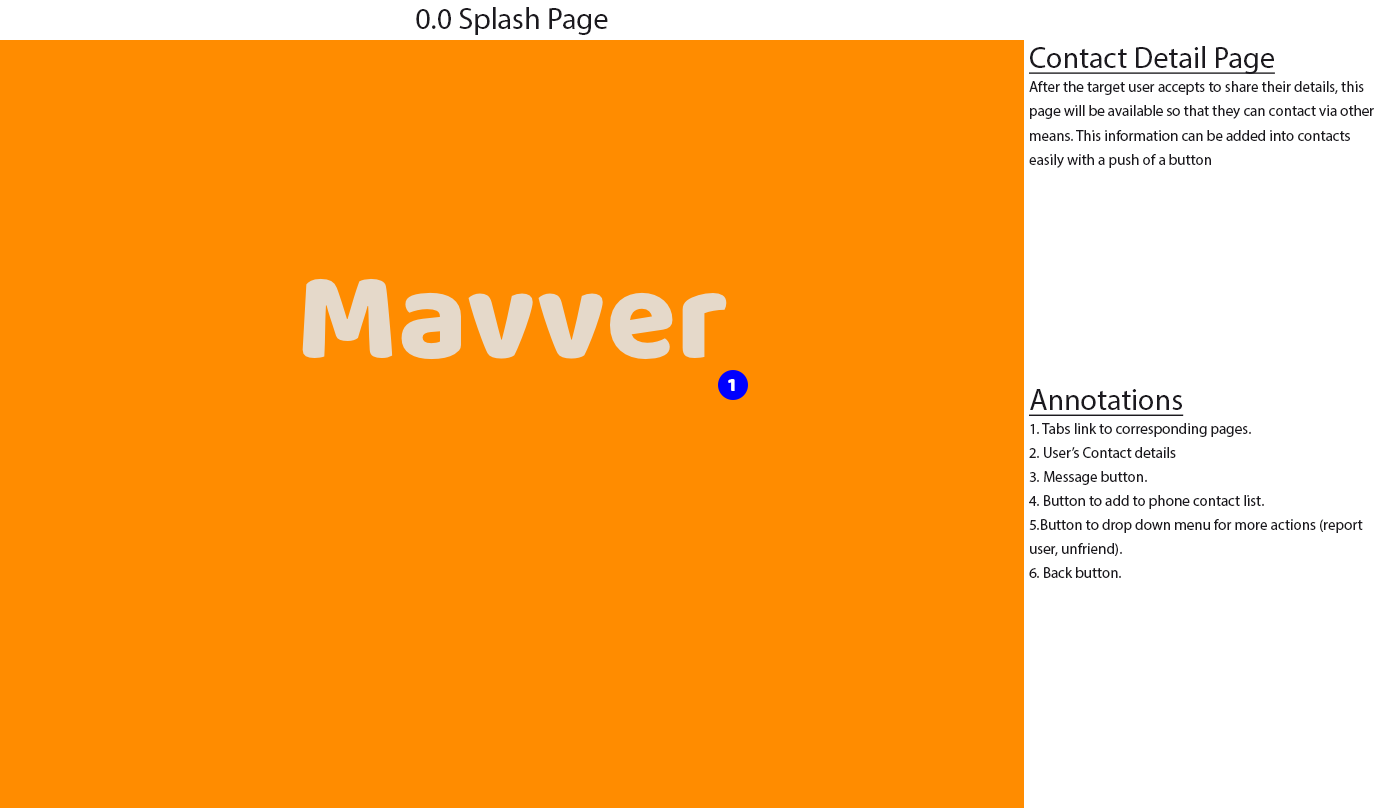
<style>
.page{position:relative;width:1384px;height:808px;background:#ff8c00}
.page>*{position:absolute;margin:0}
.t1{font:30px "MyriadPro-Regular";color:#1b191e}
.t2{font:15px/24.3px "MyriadPro-Regular";color:#1b191e}
.t3{font:30px/32.3px "MyriadPro-Regular";color:#1b191e;text-decoration:underline}
.t4{font:20px "Baloo-Regular";color:#ffffff}
.t5{font:15px/24px "MyriadPro-Regular";color:#1b191e}
</style>
<div class="page">
<p class="t1" style="left:416px;top:7px;width:192px;height:28px">0.0 Splash Page</p>
<p class="t2" style="left:1029px;top:46px;width:345px;height:122px"><span class="t3">Contact Detail Page<br></span>After the target user accepts to share their details, this page will be available so that they can contact via other means. This information can be added into contacts easily with a push of a button</p>
<p class="t4" style="left:728px;top:379px;width:7px;height:12px">1</p>
<p class="t5" style="left:1029px;top:389px;width:334px;height:189px"><span class="t3">Annotations<br></span>1. Tabs link to corresponding pages.<br>2. User’s Contact details<br>3. Message button.<br>4. Button to add to phone contact list.<br>5.Button to drop down menu for more actions (report user, unfriend).<br>6. Back button.</p>
</div>
